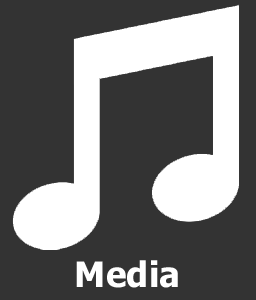
<style>
.page{position:relative;width:256px;height:300px;background:#333333}
.page>*{position:absolute;margin:0}
.t1{font:35px "Tahoma-Bold";color:#ffffff}
</style>
<div class="page">
<p class="t1" style="left:76px;top:260px;width:102px;height:28px">Media</p>
</div>
